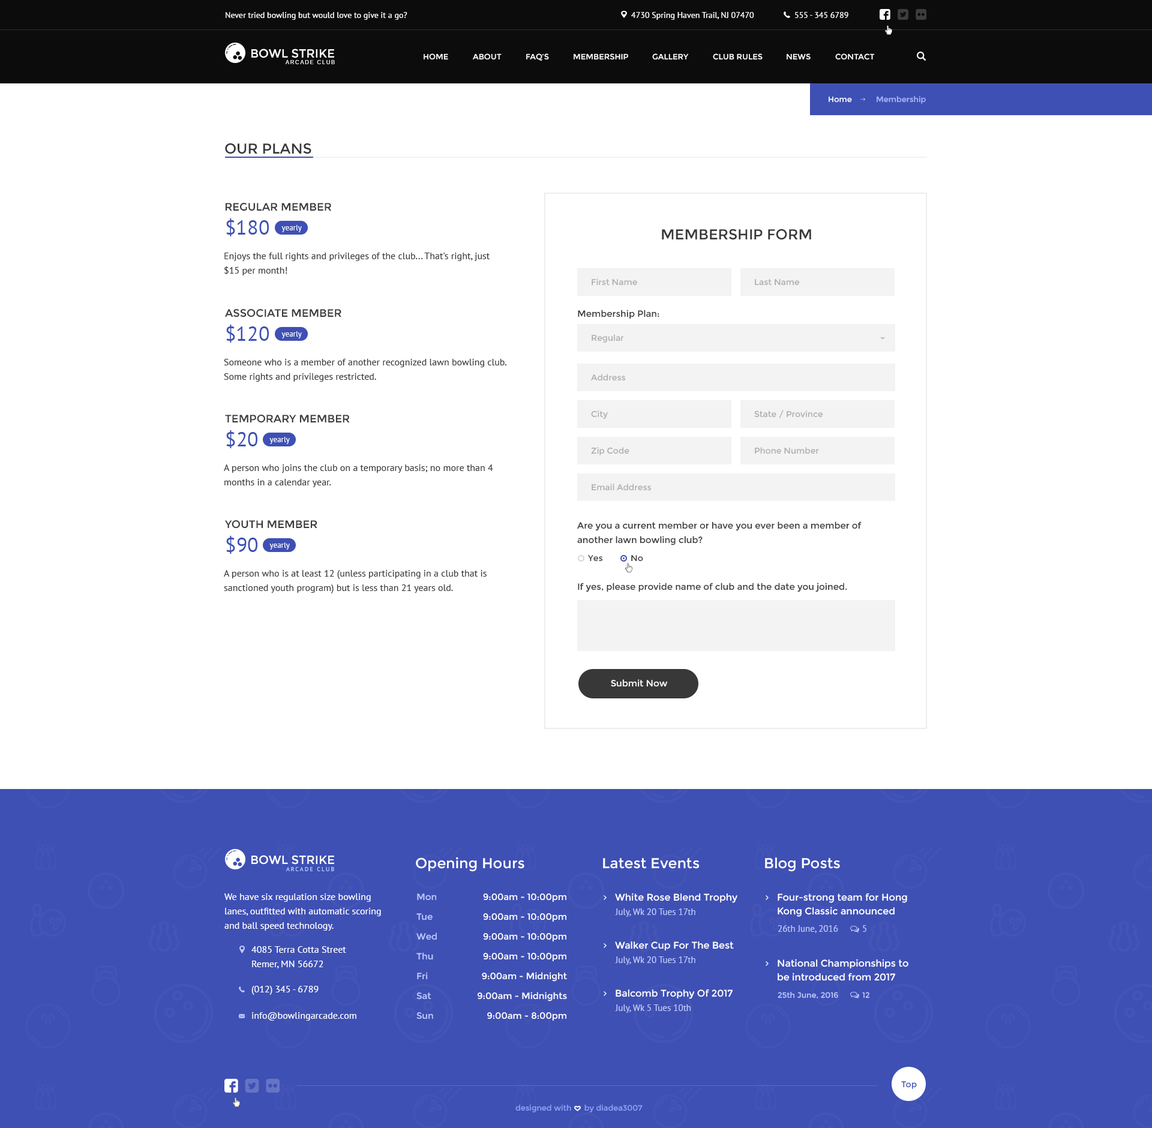
<style>
.page{position:relative;width:1152px;height:1128px;background:#ffffff}
.page>*{position:absolute;margin:0}
.t1{font:8.4px "PTSans-Regular";color:#ffffff}
.t2{font:12px "Montserrat-Regular";color:#ffffff;text-transform:uppercase}
.t3{font:7.8px "Montserrat-Regular";color:#ffffff;text-transform:uppercase}
.t4{font:5.4px "Arimo";letter-spacing:0.2em;color:#ffffff;text-transform:uppercase}
.t5{font:7.8px "Montserrat-Regular";color:#ffffff}
.t6{font:7.8px "Montserrat-Regular";color:#acb9ff}
.t7{font:14.4px "Montserrat-Regular";color:#393838;text-transform:uppercase}
.t8{font:10.8px "Montserrat-Regular";color:#393838}
.t9{font:20.4px "PTSans-Regular";color:#3e50b4}
.t10{font:7.8px "PTSans-Regular";color:#ffffff}
.t11{font:9.6px/14.4px "PTSans-Regular";color:#393838}
.t12{font:8.4px "Montserrat-Regular";color:#aeaeae}
.t13{font:10.8px "Montserrat-Regular";color:#393838;text-transform:uppercase}
.t14{font:9px "Montserrat-Regular";color:#393838}
.t15{font:9px/14.4px "Montserrat-Regular";color:#393838}
.t16{font:8.4px "Montserrat-Regular";color:#393838}
.t17{font:9px "Montserrat-Regular";color:#ffffff}
.t18{font:14.4px "Montserrat-Regular";color:#ffffff}
.t19{font:6px "PTSans-Regular";letter-spacing:0.2em;color:#bfc9ff;text-transform:uppercase}
.t20{font:9.6px/14.4px "PTSans-Regular";color:#ffffff}
.t21{font:9px/19.8px "Montserrat-Regular";color:#bfc9ff}
.t22{font:9px/19.8px "Montserrat-Regular";color:#ffffff}
.t23{font:9.6px "Montserrat-Regular";color:#ffffff}
.t24{font:9.6px/13.8px "Montserrat-Regular";color:#ffffff}
.t25{font:9px "PTSans-Regular";color:#bfc9ff}
.t26{font:9px "PTSans-Regular";color:#bfc9ff;text-transform:uppercase}
.t27{font:9.6px "PTSans-Regular";color:#ffffff}
.t28{font:7.8px "Montserrat-Regular";color:#bfc9ff}
.t29{font:7.8px "Montserrat-Regular";color:#bfc9ff;text-transform:uppercase}
.t30{font:8.4px "Montserrat-Regular";color:#3e50b4}
.t31{font:7.8px "Montserrat-Regular";color:#91a1f7}
</style>
<div class="page">
<p class="t1" style="left:226px;top:12px;width:181px;height:8px">Never tried bowling but would love to give it a go?</p>
<p class="t1" style="left:631px;top:12px;width:123px;height:8px">4730 Spring Haven Trail, NJ 07470</p>
<p class="t1" style="left:795px;top:12px;width:53px;height:6px">555 - 345 6789</p>
<p class="t2" style="left:251px;top:49px;width:83px;height:9px">Bowl Strike</p>
<p class="t3" style="left:424px;top:53px;width:24px;height:7px">Home</p>
<p class="t3" style="left:473px;top:53px;width:29px;height:7px">About</p>
<p class="t3" style="left:526px;top:53px;width:23px;height:8px">FAQ’s</p>
<p class="t3" style="left:574px;top:53px;width:54px;height:7px">membership</p>
<p class="t3" style="left:652px;top:53px;width:37px;height:7px">Gallery</p>
<p class="t3" style="left:713px;top:53px;width:50px;height:7px">club rules</p>
<p class="t3" style="left:787px;top:53px;width:24px;height:7px">News</p>
<p class="t3" style="left:835px;top:53px;width:40px;height:7px">contact</p>
<p class="t4" style="left:286px;top:60px;width:49px;height:4px">arcade Club</p>
<p class="t5" style="left:829px;top:97px;width:23px;height:6px">Home</p>
<p class="t6" style="left:877px;top:96px;width:49px;height:8px">Membership</p>
<p class="t7" style="left:225px;top:143px;width:86px;height:11px">Our Plans</p>
<p class="t8" style="left:225px;top:202px;width:106px;height:9px">REGULAR MEMBER</p>
<p class="t9" style="left:226px;top:218px;width:43px;height:18px">$180</p>
<p class="t10" style="left:281px;top:225px;width:21px;height:7px">yearly</p>
<p class="t7" style="left:662px;top:229px;width:149px;height:11px">Membership Form</p>
<p class="t11" style="left:224px;top:253px;width:266px;height:22px">Enjoys the full rights and privileges of the club... That's right, just $15 per month!</p>
<p class="t12" style="left:592px;top:278px;width:45px;height:8px">First Name</p>
<p class="t12" style="left:755px;top:279px;width:45px;height:7px">Last Name</p>
<p class="t13" style="left:225px;top:308px;width:116px;height:9px">associate MEMBER</p>
<p class="t14" style="left:578px;top:310px;width:81px;height:9px">Membership Plan:</p>
<p class="t9" style="left:226px;top:325px;width:43px;height:18px">$120</p>
<p class="t10" style="left:281px;top:331px;width:21px;height:7px">yearly</p>
<p class="t12" style="left:592px;top:334px;width:32px;height:9px">Regular</p>
<p class="t11" style="left:224px;top:359px;width:282px;height:23px">Someone who is a member of another recognized lawn bowling club.  Some rights and privileges restricted.</p>
<p class="t12" style="left:591px;top:374px;width:34px;height:7px">Address</p>
<p class="t12" style="left:591px;top:410px;width:17px;height:9px">City</p>
<p class="t12" style="left:754px;top:410px;width:69px;height:8px">State / Province</p>
<p class="t13" style="left:225px;top:415px;width:125px;height:8px">temporary MEMBER</p>
<p class="t9" style="left:226px;top:430px;width:31px;height:18px">$20</p>
<p class="t10" style="left:269px;top:437px;width:21px;height:7px">yearly</p>
<p class="t12" style="left:591px;top:447px;width:38px;height:8px">Zip Code</p>
<p class="t12" style="left:755px;top:447px;width:64px;height:7px">Phone Number</p>
<p class="t11" style="left:224px;top:464px;width:269px;height:23px">A person who joins the club on a temporary basis; no more than 4 months in a calendar year.</p>
<p class="t12" style="left:592px;top:484px;width:59px;height:7px">Email Address</p>
<p class="t13" style="left:224px;top:520px;width:93px;height:9px">YOUTH MEMBER</p>
<p class="t15" style="left:577px;top:521px;width:285px;height:24px">Are you a current member or have you ever been a member of <br>another lawn bowling club?</p>
<p class="t9" style="left:226px;top:536px;width:31px;height:18px">$90</p>
<p class="t10" style="left:269px;top:542px;width:21px;height:8px">yearly</p>
<p class="t16" style="left:588px;top:555px;width:14px;height:7px">Yes</p>
<p class="t16" style="left:631px;top:555px;width:12px;height:7px">No</p>
<p class="t11" style="left:224px;top:570px;width:263px;height:23px">A person who is at least 12 (unless participating in a club that is<br>sanctioned youth program) but is less than 21 years old.</p>
<p class="t14" style="left:578px;top:583px;width:269px;height:9px">If yes, please provide name of club and the date you joined.</p>
<p class="t17" style="left:611px;top:679px;width:57px;height:8px">Submit Now</p>
<p class="t2" style="left:251px;top:855px;width:83px;height:10px">Bowl strike</p>
<p class="t18" style="left:416px;top:857px;width:108px;height:15px">Opening Hours</p>
<p class="t18" style="left:765px;top:857px;width:75px;height:15px">Blog Posts</p>
<p class="t19" style="left:286px;top:867px;width:48px;height:4px">arcade Club</p>
<p class="t18" style="left:603px;top:858px;width:96px;height:11px">Latest Events</p>
<p class="t20" style="left:224px;top:893px;width:157px;height:38px">We have six regulation size bowling lanes, outfitted with automatic scoring and ball speed technology.</p>
<p class="t21" style="left:416px;top:893px;width:21px;height:126px">Mon<br>Tue<br>Wed<br>Thu<br>Fri<br>Sat<br>Sun</p>
<p class="t22" style="left:477px;top:893px;width:90px;height:128px;text-align:right">9:00am - 10:00pm<br>9:00am - 10:00pm<br>9:00am - 10:00pm<br>9:00am - 10:00pm<br>9:00am - Midnight<br>9:00am - Midnights<br>9:00am - 8:00pm</p>
<p class="t23" style="left:615px;top:893px;width:122px;height:10px">White Rose Blend Trophy</p>
<p class="t24" style="left:778px;top:893px;width:129px;height:24px">Four-strong team for Hong Kong Classic announced</p>
<p class="t25" style="left:615px;top:908px;width:80px;height:9px">July, Wk 20 Tues 17th</p>
<p class="t25" style="left:778px;top:925px;width:60px;height:8px">26th June, 2016</p>
<p class="t26" style="left:863px;top:925px;width:3px;height:7px">5</p>
<p class="t23" style="left:615px;top:941px;width:119px;height:10px">Walker Cup For The Best</p>
<p class="t20" style="left:251px;top:946px;width:95px;height:22px">4085 Terra Cotta Street<br>Remer, MN 56672</p>
<p class="t25" style="left:615px;top:956px;width:80px;height:9px">July, Wk 20 Tues 17th</p>
<p class="t24" style="left:778px;top:959px;width:130px;height:22px">National Championships to be introduced from 2017</p>
<p class="t27" style="left:251px;top:986px;width:68px;height:9px">(012) 345 - 6789</p>
<p class="t23" style="left:616px;top:989px;width:117px;height:10px">Balcomb Trophy Of 2017</p>
<p class="t28" style="left:778px;top:992px;width:60px;height:7px">25th June, 2016</p>
<p class="t29" style="left:862px;top:992px;width:8px;height:6px">12</p>
<p class="t27" style="left:252px;top:1012px;width:104px;height:9px">info@bowlingarcade.com</p>
<p class="t25" style="left:615px;top:1004px;width:76px;height:9px">July, Wk 5 Tues 10th</p>
<p class="t30" style="left:901px;top:1081px;width:16px;height:8px">Top</p>
<p class="t31" style="left:515px;top:1105px;width:128px;height:7px">designed with      by diadea3007</p>
</div>
